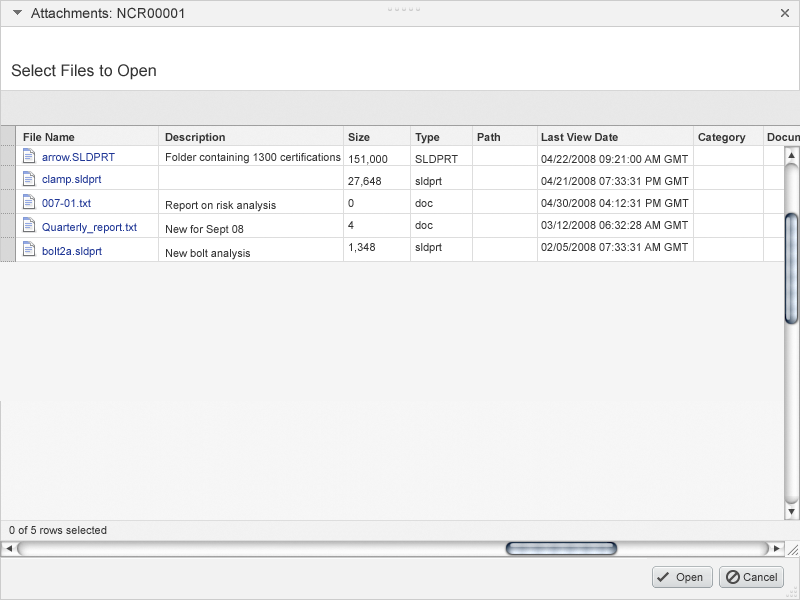
<style>
.page{position:relative;width:800px;height:600px;background:#f5f5f5}
.page>*{position:absolute;margin:0}
.t1{font:14px "ArialMT";color:#333333}
.t2{font:16px "ArialMT";letter-spacing:0.005em;color:#333333}
.t3{font:11px "Arial-BoldMT";color:#333333}
.t4{font:11px/24px "ArialMT";color:#333333}
.t5{font:11px/20px "Arial-BoldMT";color:#333333}
.t6{font:11px/20px "ArialMT";color:#333333}
.t7{font:11px/22px "ArialMT";color:#333333}
.t8{font:11px/22px "Arial-BoldMT";color:#333333}
.t9{font:11px "ArialMT";color:#1f3695}
.t10{font:11px/24px "ArialMT";color:#1f3695}
.t11{font:11px/20px "ArialMT";color:#1f3695}
.t12{font:11px "ArialMT";color:#333333}
</style>
<div class="page">
<p class="t1" style="left:31px;top:7px;width:153px;height:12px">Attachments: NCR00001</p>
<p class="t2" style="left:11px;top:64px;width:145px;height:16px">Select Files to Open</p>
<p class="t3" style="left:23px;top:133px;width:52px;height:8px">File Name</p>
<p class="t4" style="left:165px;top:133px;width:176px;height:127px"><span class="t5">Description<br></span><span class="t6">Folder containing 1300 certifications<br></span><br>Report on risk analysis<br>New for Sept 08<br>New bolt analysis</p>
<p class="t7" style="left:348px;top:133px;width:40px;height:120px"><span class="t8">Size<br></span>151,000 <br>27,648<br>0<br>4<br>1,348</p>
<p class="t7" style="left:415px;top:133px;width:43px;height:121px"><span class="t8">Type      <br></span>SLDPRT<br>sldprt<br>doc<br>doc<br>sldprt</p>
<p class="t3" style="left:477px;top:133px;width:23px;height:8px">Path</p>
<p class="t9" style="left:42px;top:153px;width:73px;height:8px"><span class="t3"><br></span>arrow.SLDPRT</p>
<p class="t10" style="left:42px;top:175px;width:95px;height:83px"><span class="t11">clamp.sldprt<br></span>007-01.txt<br>Quarterly_report.txt<br>bolt2a.sldprt</p>
<p class="t12" style="left:9px;top:526px;width:98px;height:8px">0 of 5 rows selected</p>
<p class="t12" style="left:676px;top:573px;width:27px;height:11px">Open</p>
<p class="t12" style="left:743px;top:573px;width:34px;height:8px">Cancel</p>
</div>
